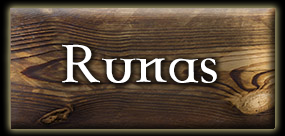
<style>
.page{position:relative;width:285px;height:136px}
.page>*{position:absolute;margin:0}
.t1{font:46.8px "CelticGaramondthe2nd";letter-spacing:0.02em;color:#ffffff;scale:0.93 1}
</style>
<div class="page">
<p class="t1" style="left:62px;top:44px;width:155px;height:39px">Runas</p>
</div>
